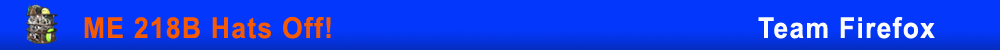
<style>
.page{position:relative;width:1000px;height:50px;background:#0338fc}
.page>*{position:absolute;margin:0}
.t1{font:28.8px "Arial-BoldMT";letter-spacing:0.05em;color:#f75a05;scale:0.92 1}
.t2{font:28.8px "Arial-BoldMT";letter-spacing:0.05em;color:#fcfcfc;scale:0.92 1}
</style>
<div class="page">
<p class="t1" style="left:84px;top:17px;width:247px;height:22px">ME 218B Hats Off!</p>
<p class="t2" style="left:758px;top:17px;width:177px;height:22px">Team Firefox</p>
</div>
